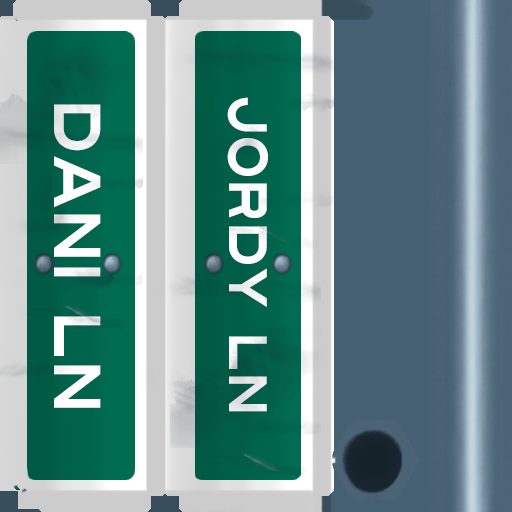
<style>
.page{position:relative;width:512px;height:512px}
.page>*{position:absolute;margin:0}
.t1{font:54px "Turnpike";color:#fefeff;scale:0.75 1}
.t2{font:66px "Turnpike";color:#fefeff;scale:0.75 1}
</style>
<div class="page">
<p class="t1" style="left:227px;top:97px;width:41px;height:315px;rotate:90deg">Jordy Ln</p>
<p class="t2" style="left:54px;top:104px;width:47px;height:304px;rotate:90deg">Dani LN</p>
</div>
